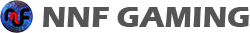
<style>
.page{position:relative;width:250px;height:33px;background:#ffffff}
.page>*{position:absolute;margin:0}
.t1{font:30px "ErasITC-Bold";color:#555555}
</style>
<div class="page">
<p class="t1" style="left:43px;top:7px;width:206px;height:20px">NNF GAMING</p>
</div>
